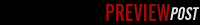
<style>
.page{position:relative;width:200px;height:25px;background:#000000}
.page>*{position:absolute;margin:0}
.t1{font:24px "AlternateGothicNo2BT-Regular";color:#9e0b0e;text-transform:uppercase}
.t2{font:18px "AlternateGothicNo2BT-Regular";color:#e5e5e5;text-transform:uppercase;font-style:italic}
</style>
<div class="page">
<p class="t1" style="left:106px;top:4px;width:64px;height:17px">preview</p>
<p class="t2" style="left:170px;top:7px;width:30px;height:13px">post</p>
</div>
